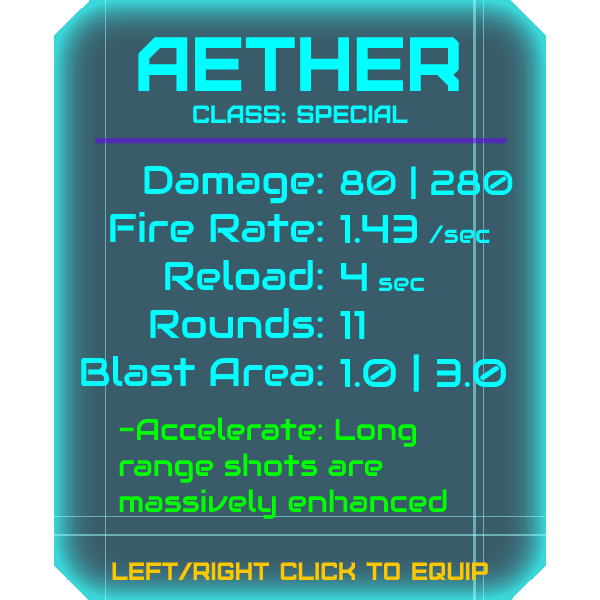
<style>
.page{position:relative;width:600px;height:600px;background:#3a5c6a}
.page>*{position:absolute;margin:0}
.t1{font:76.8px "Furore";color:#00ffff}
.t2{font:25px "Furore";color:#00ffff}
.t3{font:40px "Audiowide-Regular";color:#00ffff}
.t4{font:35px "Audiowide-Regular";color:#00ffff}
.t5{font:25px "Audiowide-Regular";color:#00ffff}
.t6{font:30px "Audiowide-Regular";color:#00ff00}
.t7{font:25px "Furore";color:#ffc700}
</style>
<div class="page">
<p class="t1" style="left:138px;top:37px;width:321px;height:54px">Aether</p>
<p class="t2" style="left:193px;top:105px;width:215px;height:18px">Class: Special</p>
<p class="t3" style="left:81px;top:165px;width:242px;height:221px;text-align:right">Damage:<br>Fire Rate:<br>Reload:<br>Rounds:<br>Blast Area:</p>
<p class="t3" style="left:340px;top:166px;width:173px;height:226px"><span class="t4">80 | 280<br></span>1.43 <span class="t5">/sec<br></span>4 <span class="t5">sec<br></span>11<br>1.0 | 3.0</p>
<p class="t6" style="left:119px;top:417px;width:328px;height:102px">-Accelerate: Long<br>range shots are<br>massively enhanced</p>
<p class="t7" style="left:112px;top:562px;width:376px;height:18px">left/right click to equip</p>
</div>
